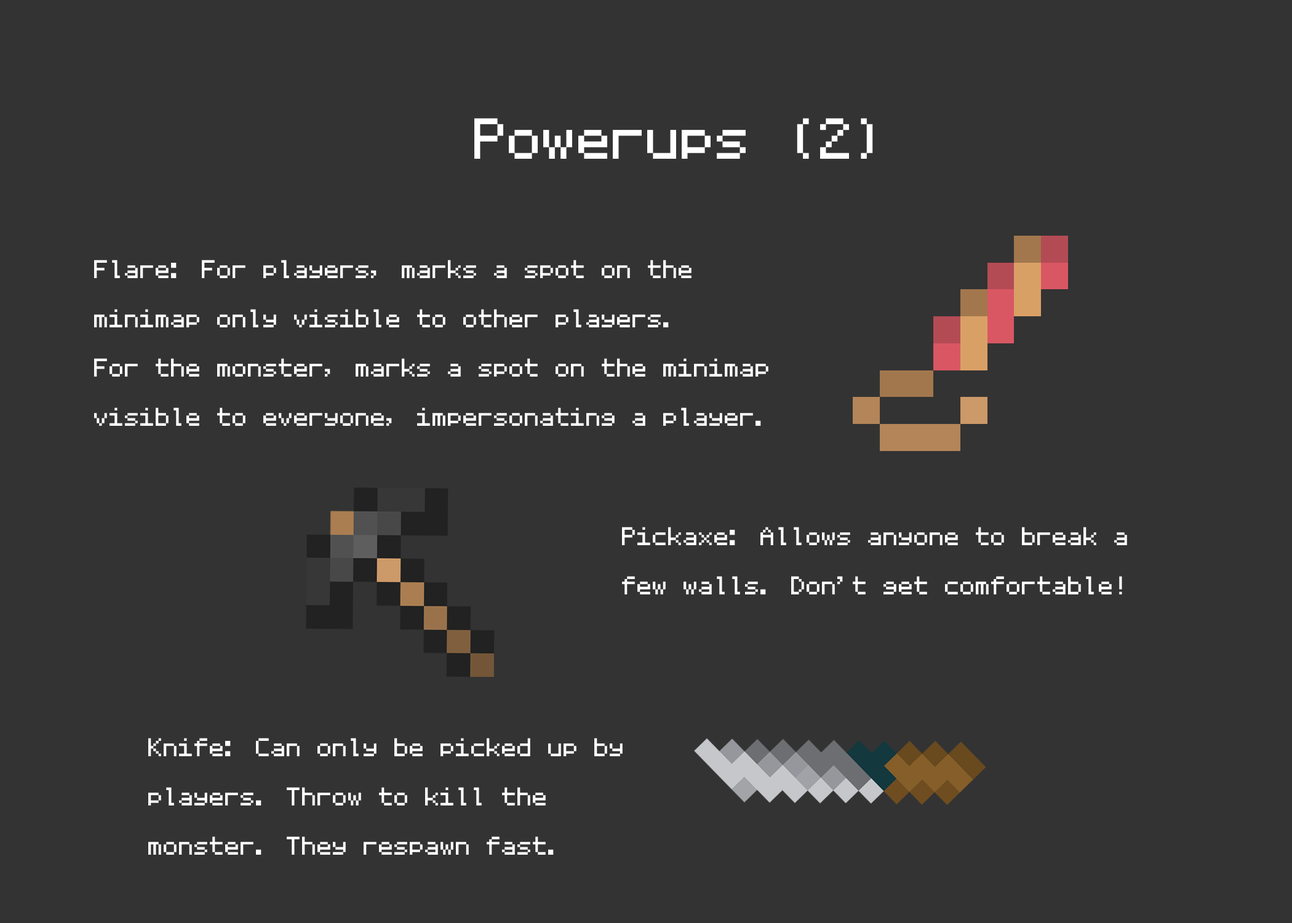
<style>
.page{position:relative;width:1292px;height:923px;background:#333333}
.page>*{position:absolute;margin:0}
.t1{font:92.3px "MozartNBP";color:#ffffff}
.t2{font:41px "MozartNBP";color:#ffffff}
</style>
<div class="page">
<p class="t1" style="left:474px;top:118px;width:399px;height:41px">Powerups (2)</p>
<p class="t2" style="left:94px;top:260px;width:674px;height:166px">Flare: For players, marks a spot on the<br>minimap only visible to other players. <br>For the monster, marks a spot on the minimap<br>visible to everyone, impersonating a player.</p>
<p class="t2" style="left:622px;top:527px;width:505px;height:67px">Pickaxe: Allows anyone to break a<br>few walls. Don’t get comfortable!</p>
<p class="t2" style="left:148px;top:738px;width:475px;height:117px">Knife: Can only be picked up by<br>players. Throw to kill the<br>monster. They respawn fast.</p>
</div>
